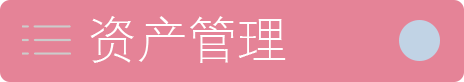
<style>
.page{position:relative;width:464px;height:82px;background:#e58397}
.page>*{position:absolute;margin:0}
.t1{font:50px "DengXian-Light";color:#ffffff}
</style>
<div class="page">
<p class="t1" style="left:90px;top:16px;width:196px;height:47px">资产管理</p>
</div>
